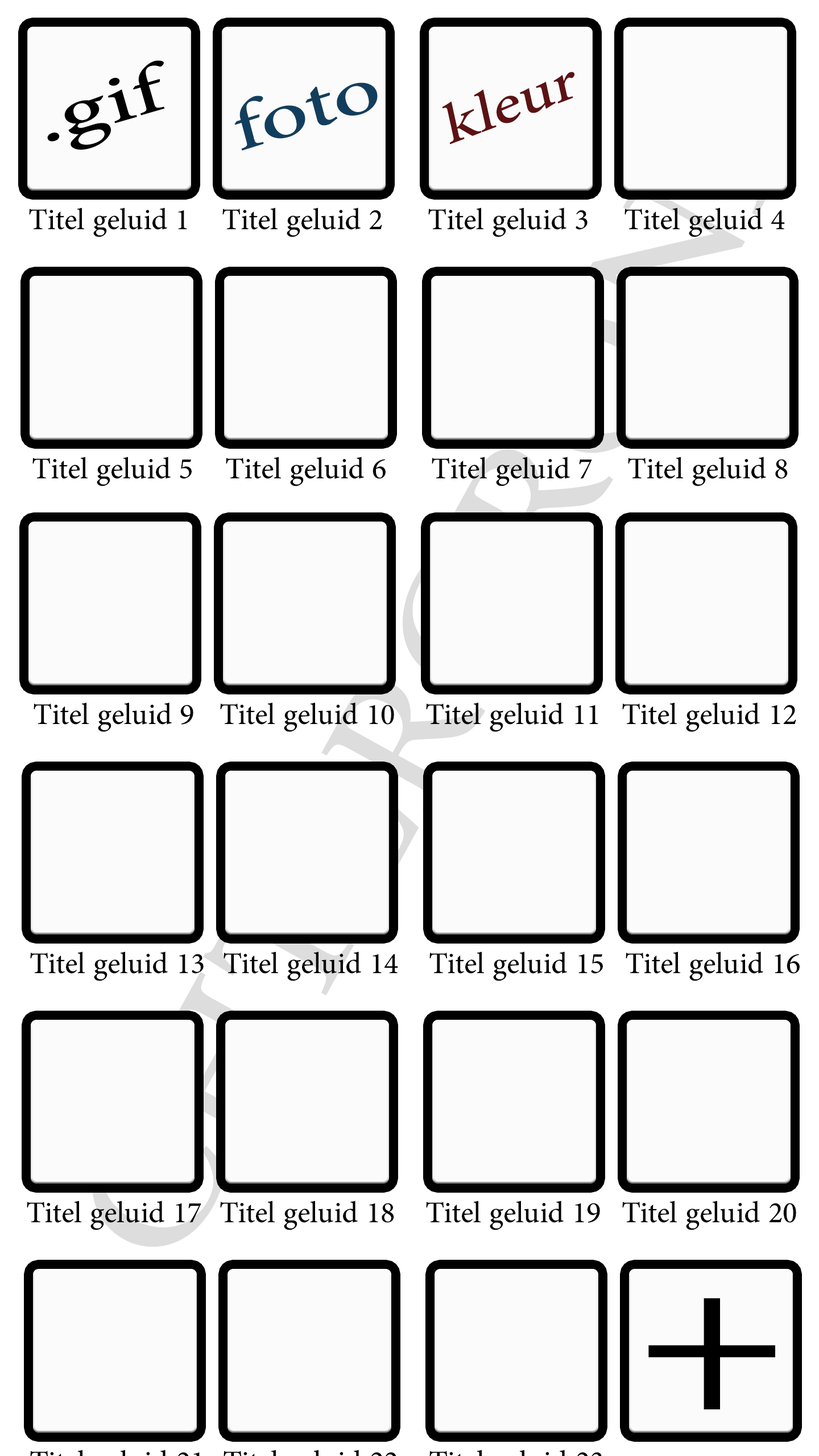
<style>
.page{position:relative;width:819px;height:1456px;background:#fbfbfb}
.page>*{position:absolute;margin:0}
.t1{font:95.1px "AdobeArabic-Regular";color:#000000;scale:1.45 1}
.t2{font:78.6px "AdobeArabic-Regular";color:#5d1214;scale:1.15 1}
.t3{font:94.6px "AdobeArabic-Regular";color:#123e5d;scale:1.35 1}
.t4{font:42.3px "AdobeArabic-Regular";color:#000000}
.t5{font:321.2px "AdobeArabic-Regular";color:#000000;scale:1.16 1}
</style>
<div class="page">
<p class="t1" style="left:47px;top:60px;width:118px;height:90px;rotate:-16deg">.gif</p>
<p class="t2" style="left:442px;top:72px;width:132px;height:72px;rotate:-21deg">kleur</p>
<p class="t3" style="left:234px;top:82px;width:144px;height:69px;rotate:-17deg">foto</p>
<p class="t4" style="left:29px;top:208px;width:158px;height:29px">Titel geluid 1</p>
<p class="t4" style="left:222px;top:208px;width:160px;height:29px">Titel geluid 2</p>
<p class="t4" style="left:428px;top:208px;width:160px;height:29px">Titel geluid 3</p>
<p class="t4" style="left:624px;top:208px;width:161px;height:29px">Titel geluid 4</p>
<p class="t4" style="left:32px;top:457px;width:160px;height:29px">Titel geluid 5</p>
<p class="t4" style="left:226px;top:457px;width:160px;height:29px">Titel geluid 6</p>
<p class="t4" style="left:432px;top:457px;width:160px;height:29px">Titel geluid 7</p>
<p class="t4" style="left:628px;top:457px;width:160px;height:29px">Titel geluid 8</p>
<p class="t4" style="left:34px;top:702px;width:159px;height:30px">Titel geluid 9</p>
<p class="t4" style="left:220px;top:702px;width:174px;height:30px">Titel geluid 10</p>
<p class="t4" style="left:426px;top:702px;width:172px;height:30px">Titel geluid 11</p>
<p class="t4" style="left:622px;top:702px;width:174px;height:30px">Titel geluid 12</p>
<p class="t4" style="left:30px;top:952px;width:174px;height:29px">Titel geluid 13</p>
<p class="t4" style="left:224px;top:952px;width:174px;height:29px">Titel geluid 14</p>
<p class="t4" style="left:429px;top:952px;width:174px;height:29px">Titel geluid 15</p>
<p class="t4" style="left:626px;top:952px;width:174px;height:29px">Titel geluid 16</p>
<p class="t4" style="left:27px;top:1201px;width:174px;height:29px">Titel geluid 17</p>
<p class="t4" style="left:220px;top:1201px;width:174px;height:29px">Titel geluid 18</p>
<p class="t4" style="left:426px;top:1201px;width:174px;height:29px">Titel geluid 19</p>
<p class="t4" style="left:622px;top:1201px;width:174px;height:29px">Titel geluid 20</p>
<p class="t5" style="left:648px;top:1298px;width:127px;height:111px">+</p>
</div>
